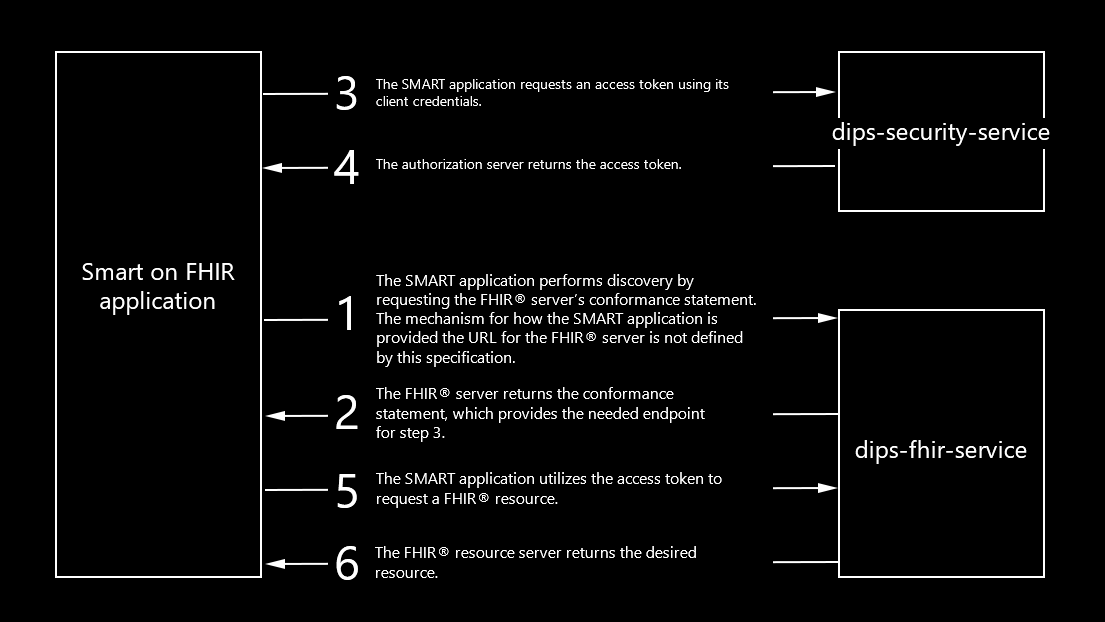
<style>
.page{position:relative;width:1105px;height:622px;background:#000000}
.page>*{position:absolute;margin:0}
.t1{font:48px "SegoeUI";color:#ffffff}
.t2{font:14px "SegoeUI";color:#ffffff}
.t3{font:24px "SegoeUI";color:#ffffff}
.t4{font:16px "SegoeUI";color:#ffffff}
</style>
<div class="page">
<p class="t1" style="left:336px;top:76px;width:21px;height:34px">3</p>
<p class="t2" style="left:376px;top:79px;width:353px;height:27px">The SMART application requests an access token using its <br>client credentials.</p>
<p class="t3" style="left:832px;top:122px;width:218px;height:24px">dips-security-service</p>
<p class="t1" style="left:334px;top:150px;width:25px;height:34px">4</p>
<p class="t2" style="left:376px;top:159px;width:305px;height:10px">The authorization server returns the access token.</p>
<p class="t3" style="left:82px;top:263px;width:153px;height:52px;text-align:center">Smart on FHIR<br>application</p>
<p class="t4" style="left:376px;top:274px;width:380px;height:93px">The SMART application performs discovery by <br>requesting the FHIR® server’s conformance statement. <br>The mechanism for how the SMART application is <br>provided the URL for the FHIR® server is not defined <br>by this specification.</p>
<p class="t1" style="left:339px;top:296px;width:12px;height:34px">1</p>
<p class="t4" style="left:376px;top:387px;width:329px;height:55px">The FHIR® server returns the conformance <br>statement, which provides the needed endpoint <br>for step 3.</p>
<p class="t1" style="left:336px;top:395px;width:22px;height:34px">2</p>
<p class="t3" style="left:855px;top:440px;width:172px;height:24px">dips-fhir-service</p>
<p class="t4" style="left:376px;top:472px;width:346px;height:36px">The SMART application utilizes the access token to<br>request a FHIR® resource.</p>
<p class="t1" style="left:337px;top:474px;width:20px;height:34px">5</p>
<p class="t1" style="left:336px;top:546px;width:22px;height:34px">6</p>
<p class="t4" style="left:375px;top:546px;width:321px;height:32px">The FHIR® resource server returns the desired <br>resource.</p>
</div>
